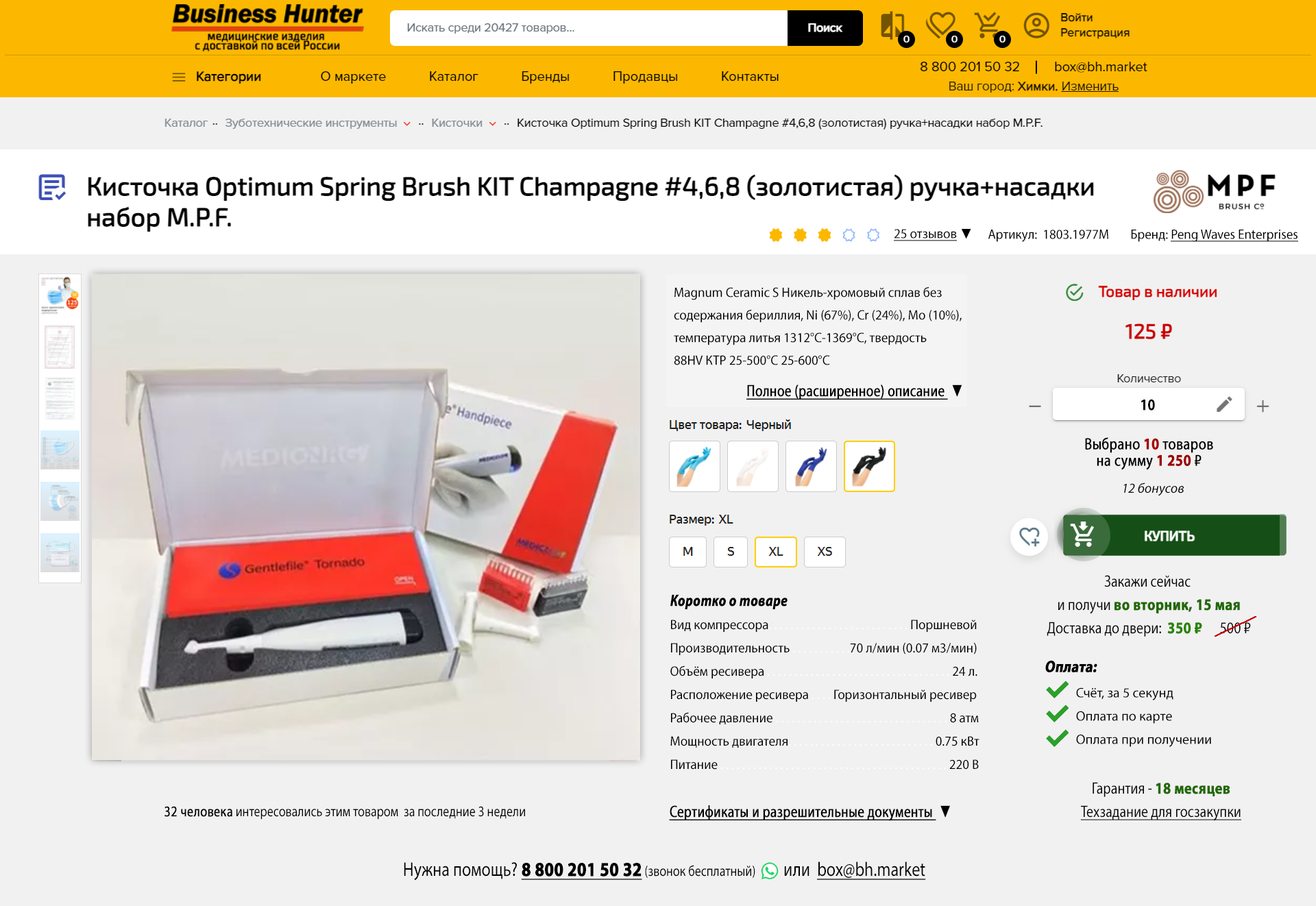
<style>
.page{position:relative;width:1316px;height:906px;background:#f1f1f1}
.page>*{position:absolute;margin:0}
.t1{font:13.7px "MyriadPro-Regular";color:#000000;text-decoration:underline;scale:0.95 1}
.t2{font:13.7px "ArialMT";color:#000000;font-weight:bold;scale:0.95 1}
.t3{font:13.7px "MyriadPro-Regular";color:#000000;scale:0.95 1}
.t4{font:13.7px/22.6px "MyriadPro-Regular";color:#000000;scale:0.95 1}
.t5{font:16.5px "MyriadPro-Regular";color:#000000;font-weight:bold;text-decoration:underline;scale:0.79 1}
.t6{font:16.5px "ArialMT";color:#000000;font-weight:bold;scale:0.79 1}
.t7{font:16.4px "MyriadPro-Bold";color:#000000;scale:0.83 1}
.t8{font:16.4px "MyriadPro-Regular";color:#000000;font-weight:bold;scale:0.83 1}
.t9{font:16.4px "MyriadPro-Bold";color:#a20000;font-weight:bold;scale:0.83 1}
.t10{font:16.4px "MyriadPro-Bold";color:#9f0000;font-weight:bold;scale:0.83 1}
.t11{font:13.7px "MyriadPro-It";color:#000000}
.t12{font:16.4px/23.3px "MyriadPro-Regular";color:#020202;scale:0.83 1}
.t13{font:16.4px/23.3px "MyriadPro-Bold";color:#206900;font-weight:bold;scale:0.83 1}
.t14{font:16.4px/23.3px "MyriadPro-Bold";color:#288400;font-weight:bold;scale:0.83 1}
.t15{font:13.7px "MyriadPro-Regular";color:#ffffff;scale:0.95 1}
.t16{font:16.5px/23.3px "MyriadPro-BoldIt";color:#000000;font-weight:bold;scale:0.79 1}
.t17{font:13.7px/23.3px "MyriadPro-Regular";color:#000000;scale:0.95 1}
.t18{font:16.4px "MyriadPro-Bold";color:#000000;font-weight:bold;font-style:italic;scale:0.83 1}
.t19{font:13.7px/23.3px "MyriadPro-Regular";color:#000000}
.t20{font:16.4px/23.3px "MyriadPro-Regular";color:#000100;text-decoration:underline;scale:0.83 1}
.t21{font:14.8px "MyriadPro-Regular";color:#000000;scale:0.83 1}
.t22{font:14.8px "MyriadPro-Regular";color:#000000;font-weight:bold;scale:0.83 1}
.t23{font:19.7px "MyriadPro-Regular";color:#000000;scale:0.83 1}
.t24{font:19.7px "MyriadPro-Bold";color:#000000;font-weight:bold;text-decoration:underline;scale:0.83 1}
.t25{font:19.7px "MyriadPro-Regular";color:#000000;text-decoration:underline;scale:0.83 1}
</style>
<div class="page">
<p class="t1" style="left:894px;top:229px;width:77px;height:12px">25 отзывов <span class="t2">▼</span></p>
<p class="t3" style="left:988px;top:230px;width:120px;height:12px">Артикул:  1803.1977М</p>
<p class="t1" style="left:1131px;top:230px;width:167px;height:12px"><span class="t3">Бренд: </span>Peng Waves Enterprises</p>
<p class="t4" style="left:674px;top:287px;width:288px;height:78px">Magnum Ceramic S Никель-хромовый сплав без <br>содержания бериллия, Ni (67%), Cr (24%), Mo (10%), <br>температура литья 1312°C-1369°C, твердость <br>88HV КТР 25-500°C 25-600°C</p>
<p class="t5" style="left:746px;top:385px;width:216px;height:15px">Полное (расширенное) описание  <span class="t6">▼</span></p>
<p class="t7" style="left:1141px;top:399px;width:14px;height:12px">10</p>
<p class="t8" style="left:1085px;top:437px;width:128px;height:33px;text-align:center">Выбрано<span class="t9"> 10 </span>товаров<br>на сумму <span class="t10">1 250 </span>₽</p>
<p class="t11" style="left:1123px;top:483px;width:61px;height:13px">12 бонусов</p>
<p class="t12" style="left:1047px;top:575px;width:204px;height:62px;text-align:center">Закажи сейчас <br>и получи <span class="t13">во вторник, 15 мая<br></span>Доставка до двери:  <span class="t14">350 ₽ </span>   500 ₽</p>
<p class="t15" style="left:670px;top:594px;width:309px;height:176px"><span class="t16">Коротко о товаре<br></span><span class="t17">Вид компрессора</span>. . . . . . . . . . . . . . . . . . . . . . . . . .<span class="t17"> Поршневой  <br>Производительность </span>. . . . . . . . . . .<span class="t17">70 л/мин (0.07 м3/мин)  <br>Объём ресивера </span>. . . . . . . . . . . . . . . . . . . . . . . . . . . . . . . . . . <span class="t17">24 л.  <br>Расположение ресивера </span>. . . . <span class="t17">Горизонтальный ресивер  <br>Рабочее давление </span>. . . . . . . . . . . . . . . . . . . . . . . . . . . . . . . . <span class="t17">8 атм  <br>Мощность двигателя</span>. . . . . . . . . . . . . . . . . . . . . . . . . . . <span class="t17">0.75 кВт  <br>Питание </span>. . . . . . . . . . . . . . . . . . . . . . . . . . . . . . . . . . . . . . . . . . <span class="t17">220 В</span></p>
<p class="t18" style="left:1045px;top:661px;width:52px;height:11px">Оплата:</p>
<p class="t19" style="left:1076px;top:687px;width:135px;height:60px">Счёт, за 5 секунд<br>Оплата по карте<br>Оплата при получении</p>
<p class="t20" style="left:1080px;top:782px;width:161px;height:39px;text-align:center"><span class="t12">Гарантия - </span><span class="t13">18 месяцев<br></span>Техзадание для госзакупки</p>
<p class="t21" style="left:164px;top:806px;width:361px;height:14px"><span class="t22">32 человека</span> интересовались этим товаром  за последние 3 недели</p>
<p class="t5" style="left:669px;top:805px;width:281px;height:16px">Сертификаты и разрешительные документы  <span class="t6">▼</span></p>
<p class="t21" style="left:404px;top:862px;width:522px;height:19px"><span class="t23">Нужна помощь? </span><span class="t24">8 800 201 50 32</span> (звонок бесплатный)<span class="t23">        или  </span><span class="t25">box@bh.market</span></p>
</div>
